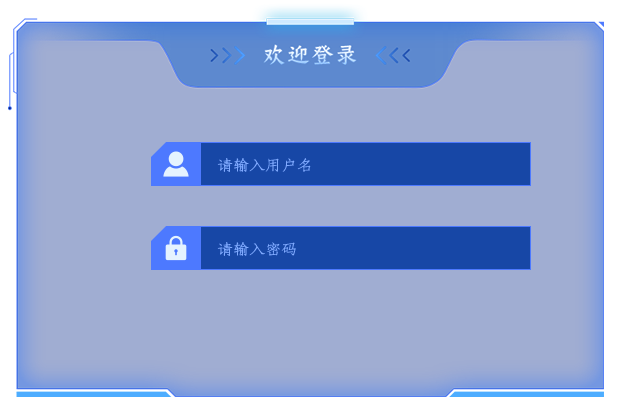
<style>
.page{position:relative;width:620px;height:420px;background:#a0add2}
.page>*{position:absolute;margin:0}
.t1{font:16px "36--Regular";color:#80aaff}
</style>
<div class="page">
<p class="t1" style="left:217px;top:158px;width:94px;height:14px">请输入用户名</p>
<p class="t1" style="left:217px;top:242px;width:79px;height:14px">请输入密码</p>
</div>
